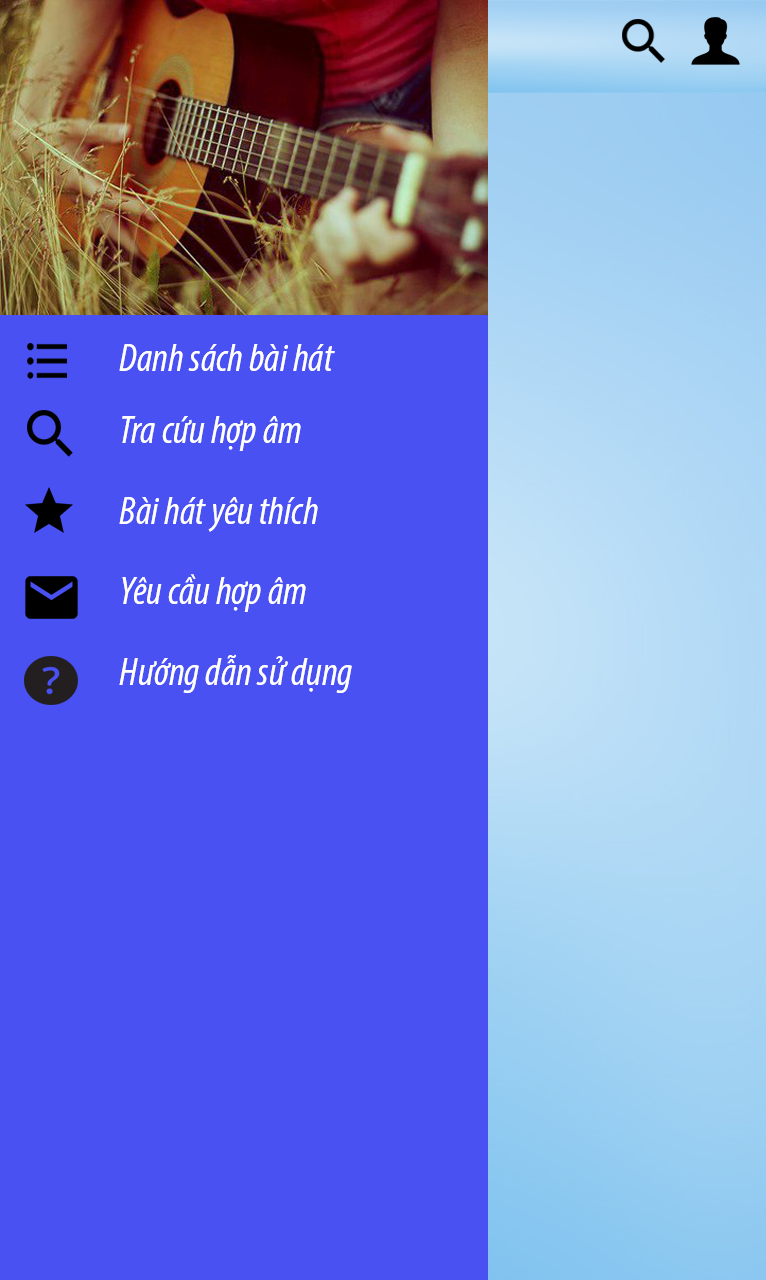
<style>
.page{position:relative;width:766px;height:1280px;background:#4951f3}
.page>*{position:absolute;margin:0}
.t1{font:40px "MyriadPro-CondIt";color:#ffffff}
</style>
<div class="page">
<p class="t1" style="left:119px;top:344px;width:216px;height:27px">Danh sách bài hát</p>
<p class="t1" style="left:122px;top:416px;width:179px;height:35px">Tra cứu hợp âm</p>
<p class="t1" style="left:119px;top:497px;width:199px;height:35px">Bài hát yêu thích</p>
<p class="t1" style="left:122px;top:574px;width:184px;height:38px">Yêu cầu hợp âm</p>
<p class="t1" style="left:119px;top:654px;width:233px;height:39px">Hướng dẫn sử dụng</p>
</div>
